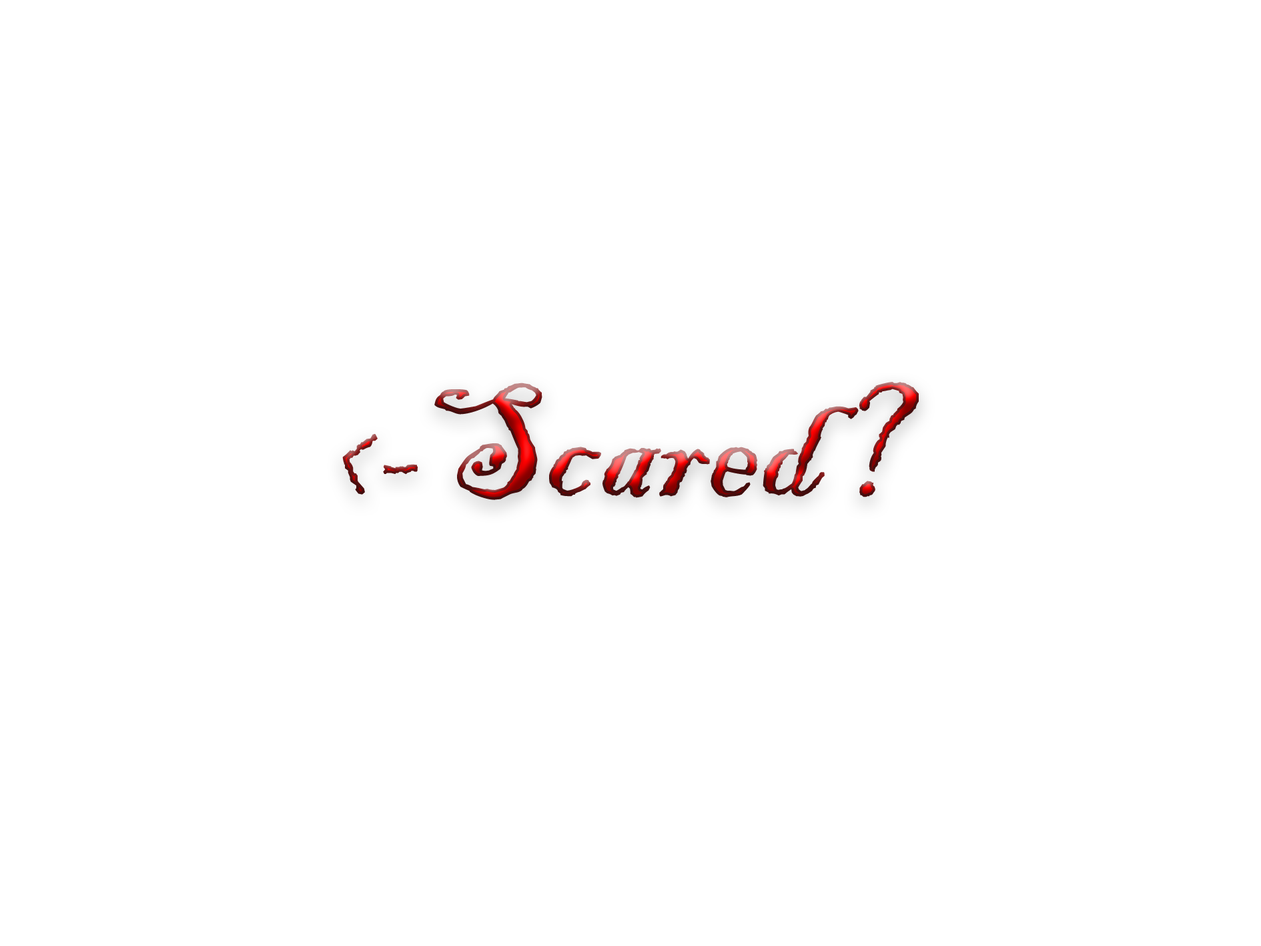
<style>
.page{position:relative;width:1261px;height:946px;background:#ffffff}
.page>*{position:absolute;margin:0}
.t1{font:166.8px "BlackadderITC-Regular"}
</style>
<div class="page">
<p class="t1" style="left:342px;top:382px;width:577px;height:118px">&lt;-Scared?</p>
</div>
